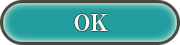
<style>
.page{position:relative;width:180px;height:45px;background:#239e9f}
.page>*{position:absolute;margin:0}
.t1{font:23px "RyuminPro-ExBold";color:#ffffff}
</style>
<div class="page">
<p class="t1" style="left:74px;top:14px;width:34px;height:17px">OK</p>
</div>
